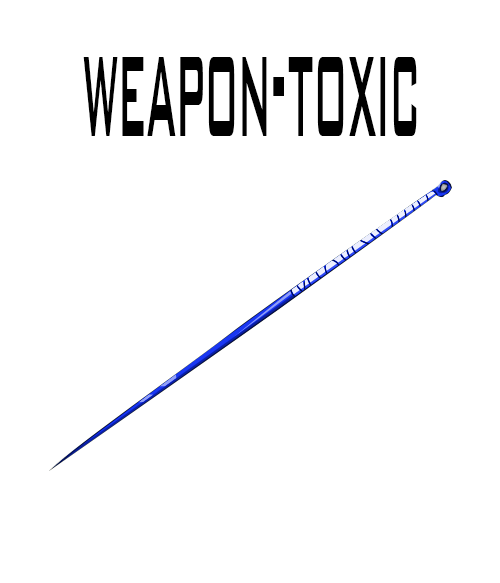
<style>
.page{position:relative;width:500px;height:583px;background:#ffffff}
.page>*{position:absolute;margin:0}
.t1{font:186.2px "BankGothicBT-Medium";color:#000000;scale:0.25 1}
</style>
<div class="page">
<p class="t1" style="left:83px;top:57px;width:334px;height:79px">weapon-toxic</p>
</div>
